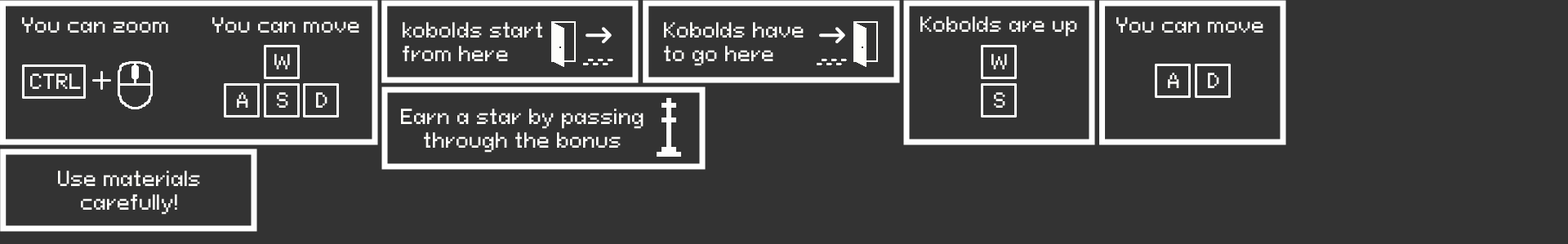
<style>
.page{position:relative;width:1568px;height:244px;background:#333333}
.page>*{position:absolute;margin:0}
.t1{font:19.6px "PixeloidSans";color:#fefefb}
</style>
<div class="page">
<p class="t1" style="left:22px;top:17px;width:146px;height:16px">You can zoom</p>
<p class="t1" style="left:212px;top:17px;width:147px;height:16px">You can move</p>
<p class="t1" style="left:920px;top:16px;width:157px;height:21px">Kobolds are up</p>
<p class="t1" style="left:1116px;top:17px;width:147px;height:16px">You can move</p>
<p class="t1" style="left:403px;top:22px;width:139px;height:39px">kobolds start <br>from here</p>
<p class="t1" style="left:664px;top:22px;width:140px;height:44px">Kobolds have<br>to go here</p>
<p class="t1" style="left:274px;top:54px;width:16px;height:15px">W</p>
<p class="t1" style="left:991px;top:54px;width:16px;height:15px">W</p>
<p class="t1" style="left:30px;top:74px;width:51px;height:15px">CTRL</p>
<p class="t1" style="left:1168px;top:73px;width:11px;height:15px">A</p>
<p class="t1" style="left:1208px;top:73px;width:11px;height:15px">D</p>
<p class="t1" style="left:237px;top:92px;width:11px;height:16px">A</p>
<p class="t1" style="left:277px;top:92px;width:11px;height:16px">S</p>
<p class="t1" style="left:316px;top:92px;width:11px;height:16px">D</p>
<p class="t1" style="left:994px;top:92px;width:11px;height:16px">S</p>
<p class="t1" style="left:401px;top:109px;width:243px;height:44px;text-align:center">Earn a star by passing<br>through the bonus</p>
<p class="t1" style="left:58px;top:171px;width:142px;height:44px;text-align:center">Use materials<br>carefully!</p>
</div>
